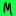
<style>
.page{position:relative;width:16px;height:16px;background:#17ff4e}
.page>*{position:absolute;margin:0}
.t1{font:18px "DFHanziPenW5-A";color:#000000}
</style>
<div class="page">
<p class="t1" style="left:3px;top:1px;width:10px;height:15px">M</p>
</div>
